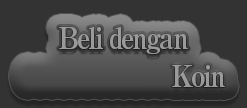
<style>
.page{position:relative;width:247px;height:108px;background:#333333}
.page>*{position:absolute;margin:0}
.t1{font:30px/38px "RyuminPro-ExBold";letter-spacing:-0.08em;color:#9a9a9a;scale:0.9 1}
</style>
<div class="page">
<p class="t1" style="left:59px;top:27px;width:166px;height:60px;text-align:center">Beli dengan<br>                      Koin</p>
</div>
